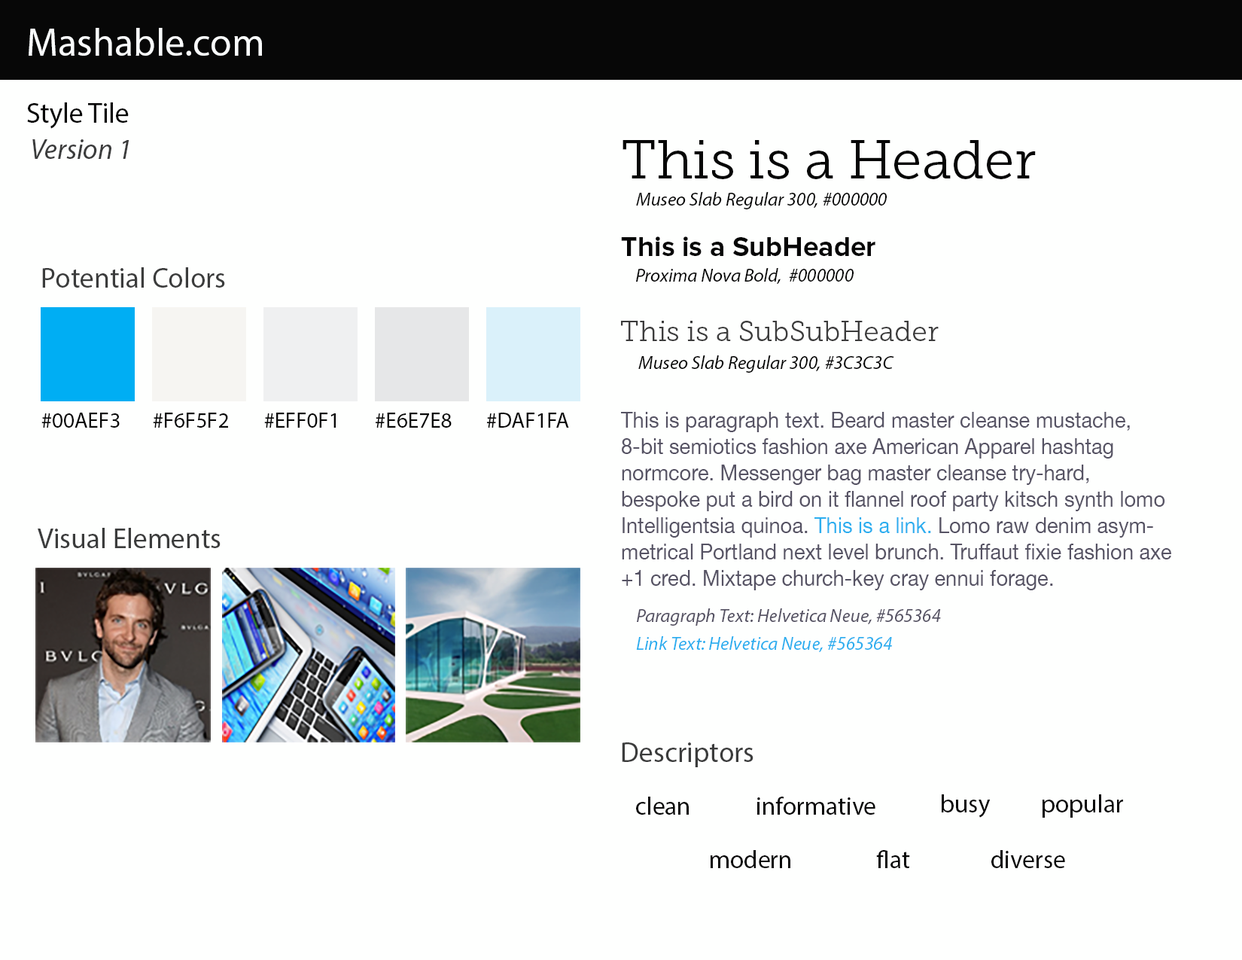
<style>
.page{position:relative;width:1242px;height:960px;background:#fefffe}
.page>*{position:absolute;margin:0}
.t1{font:39.1px "MyriadPro-Regular";color:#f9fbfc}
.t2{font:28.2px "MyriadPro-Regular";color:#060606}
.t3{font:28.2px "MyriadPro-It";color:#3b3c3c}
.t4{font:54.2px "MuseoSlab-300";color:#060606}
.t5{font:18.8px "MyriadPro-It";color:#060606}
.t6{font:28.2px "ProximaNova-Bold";color:#060606}
.t7{font:28.2px "MyriadPro-Regular";color:#3b3c3c}
.t8{font:28.2px "MuseoSlab-300";color:#3c3c3c}
.t9{font:22px "MyriadPro-Regular";color:#070707}
.t10{font:22px "HelveticaNeue";color:#565364;scale:0.93 1}
.t11{font:22px "HelveticaNeue";color:#2baeef;scale:0.93 1}
.t12{font:18.8px "MyriadPro-It";color:#565364}
.t13{font:18.8px "MyriadPro-It";color:#2baeef}
.t14{font:25.1px "MyriadPro-Regular";color:#070707}
</style>
<div class="page">
<p class="t1" style="left:29px;top:28px;width:233px;height:28px">Mashable.com</p>
<p class="t2" style="left:27px;top:102px;width:102px;height:27px">Style Tile</p>
<p class="t3" style="left:32px;top:139px;width:97px;height:20px">Version 1</p>
<p class="t4" style="left:623px;top:140px;width:413px;height:39px">This is a Header</p>
<p class="t5" style="left:636px;top:192px;width:251px;height:17px">Museo Slab Regular 300, #000000</p>
<p class="t6" style="left:621px;top:236px;width:255px;height:20px">This is a SubHeader</p>
<p class="t7" style="left:42px;top:267px;width:183px;height:21px">Potential Colors</p>
<p class="t5" style="left:636px;top:268px;width:218px;height:16px">Proxima Nova Bold,  #000000</p>
<p class="t8" style="left:621px;top:321px;width:318px;height:20px">This is a SubSubHeader</p>
<p class="t5" style="left:638px;top:355px;width:256px;height:18px">Museo Slab Regular 300, #3C3C3C</p>
<p class="t9" style="left:41px;top:413px;width:79px;height:15px">#00AEF3</p>
<p class="t9" style="left:153px;top:413px;width:75px;height:15px">#F6F5F2</p>
<p class="t9" style="left:264px;top:413px;width:72px;height:15px">#EFF0F1</p>
<p class="t9" style="left:376px;top:413px;width:76px;height:15px">#E6E7E8</p>
<p class="t9" style="left:487px;top:413px;width:82px;height:15px">#DAF1FA</p>
<p class="t10" style="left:621px;top:412px;width:550px;height:178px">This is paragraph text. Beard master cleanse mustache, 8-bit semiotics fashion axe American Apparel hashtag normcore. Messenger bag master cleanse try-hard, bespoke put a bird on it flannel roof party kitsch synth lomo Intelligentsia quinoa. <span class="t11">This is a link.</span> Lomo raw denim asymmetrical Portland next level brunch. Truffaut fixie fashion axe +1 cred. Mixtape church-key cray ennui forage.</p>
<p class="t7" style="left:38px;top:528px;width:183px;height:20px">Visual Elements</p>
<p class="t12" style="left:637px;top:608px;width:304px;height:18px">Paragraph Text: Helvetica Neue, #565364</p>
<p class="t13" style="left:636px;top:636px;width:256px;height:16px">Link Text: Helvetica Neue, #565364</p>
<p class="t7" style="left:622px;top:742px;width:132px;height:25px">Descriptors</p>
<p class="t14" style="left:636px;top:797px;width:53px;height:18px">clean</p>
<p class="t14" style="left:757px;top:797px;width:119px;height:18px">informative</p>
<p class="t14" style="left:942px;top:794px;width:49px;height:24px">busy</p>
<p class="t14" style="left:1043px;top:794px;width:80px;height:24px">popular</p>
<p class="t14" style="left:711px;top:850px;width:80px;height:18px">modern</p>
<p class="t14" style="left:876px;top:850px;width:34px;height:18px">flat</p>
<p class="t14" style="left:992px;top:850px;width:73px;height:18px">diverse</p>
</div>
